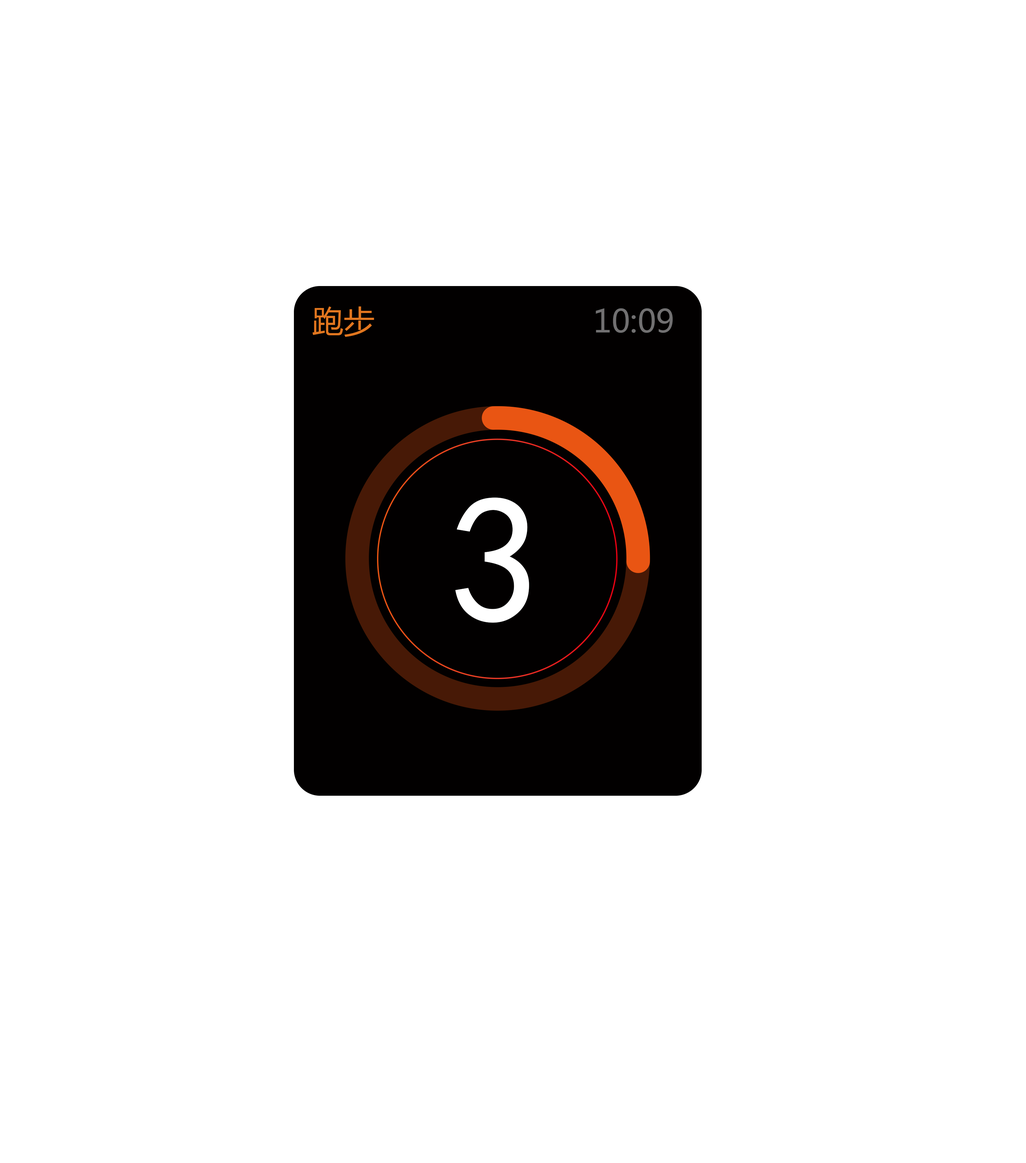
<style>
.page{position:relative;width:1026px;height:1163px;background:#ffffff}
.page>*{position:absolute;margin:0}
.t1{font:31.4px "MicrosoftYaHei";color:#e1761f}
.t2{font:31.4px "MicrosoftYaHei";color:#717071}
.t3{font:182.9px "SimHei";color:#ffffff}
</style>
<div class="page">
<p class="t1" style="left:312px;top:306px;width:62px;height:31px">跑步</p>
<p class="t2" style="left:595px;top:308px;width:78px;height:25px">10:09</p>
<p class="t3" style="left:455px;top:497px;width:74px;height:126px">3</p>
</div>
